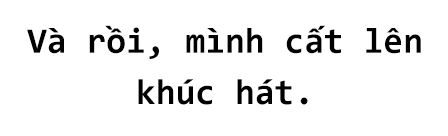
<style>
.page{position:relative;width:448px;height:136px;background:#ffffff}
.page>*{position:absolute;margin:0}
.t1{font:36px "Consolas-Bold";color:#000000}
</style>
<div class="page">
<p class="t1" style="left:27px;top:25px;width:394px;height:80px;text-align:center">Và rồi, mình cất lên <br>khúc hát.</p>
</div>
